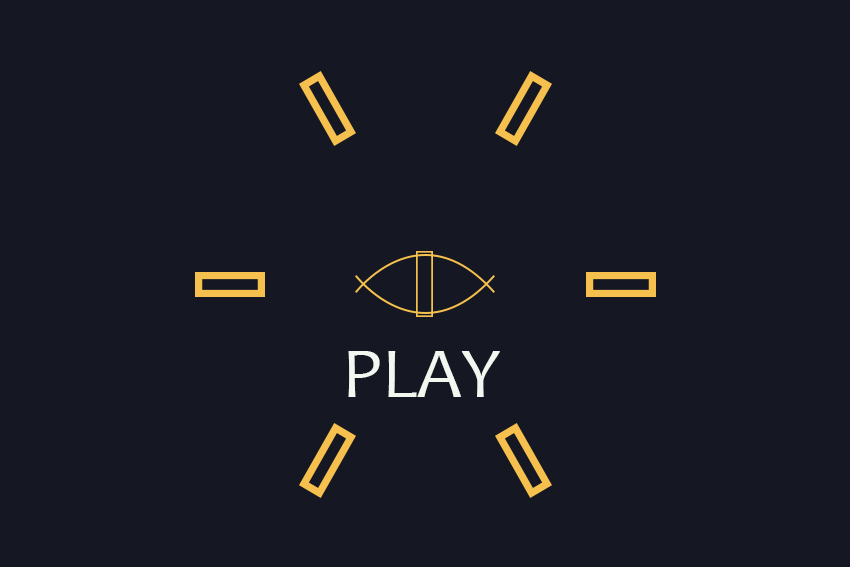
<style>
.page{position:relative;width:850px;height:567px;background:#151722}
.page>*{position:absolute;margin:0}
.t1{font:72px "Candara";color:#f2f7f0}
</style>
<div class="page">
<p class="t1" style="left:348px;top:351px;width:152px;height:46px">PLAY</p>
</div>
